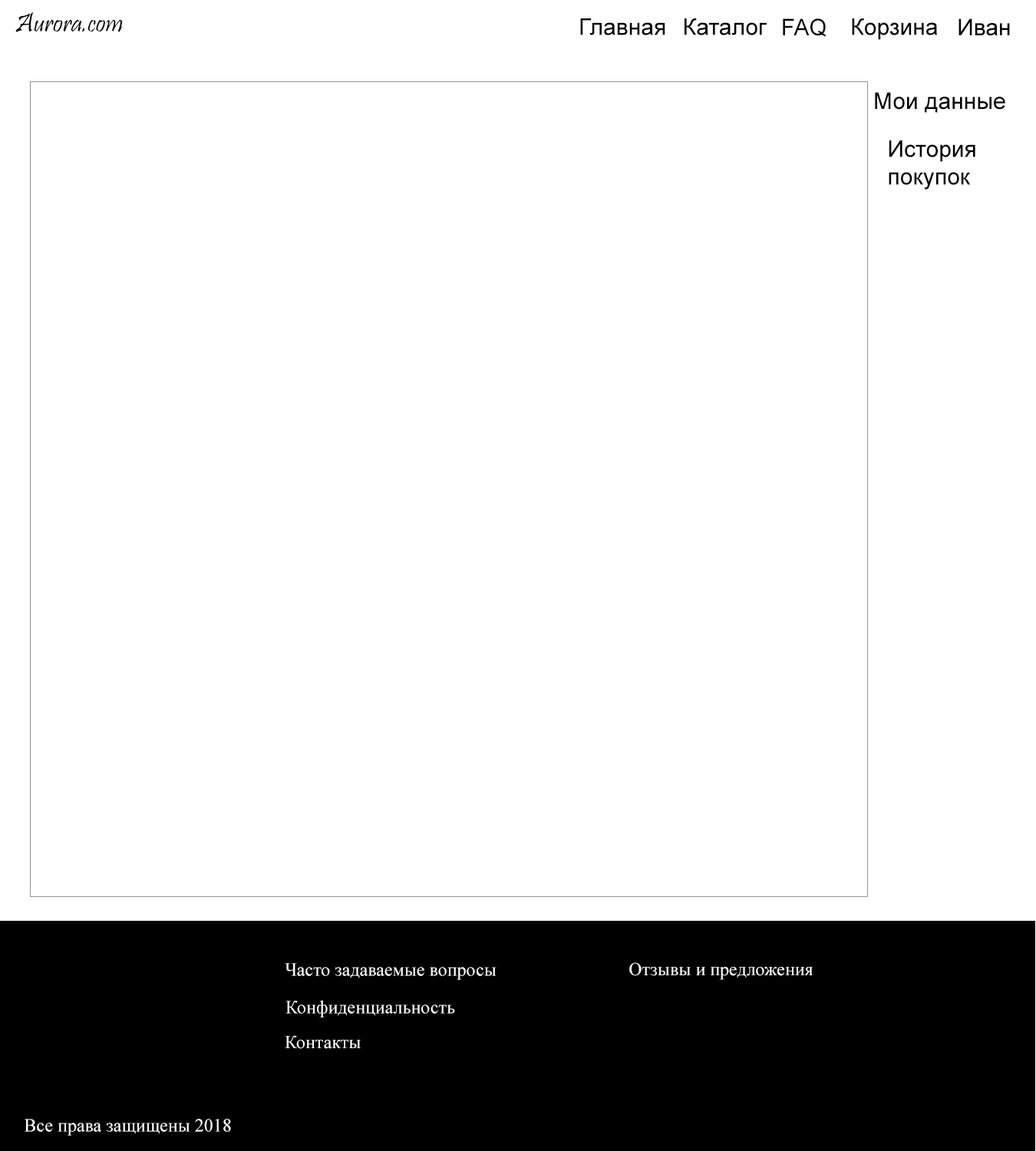
<style>
.page{position:relative;width:1036px;height:1151px;background:#ffffff}
.page>*{position:absolute;margin:0}
.t1{font:27.6px "Pristina-Regular";color:#000000}
.t2{font:23px "ArialMT";color:#000000}
.t3{font:18.4px "TimesNewRomanPSMT";color:#fffefe}
</style>
<div class="page">
<p class="t1" style="left:15px;top:12px;width:108px;height:20px">Aurora.com</p>
<p class="t2" style="left:580px;top:18px;width:85px;height:17px">Главная</p>
<p class="t2" style="left:684px;top:18px;width:83px;height:17px">Каталог</p>
<p class="t2" style="left:783px;top:18px;width:43px;height:19px">FAQ</p>
<p class="t2" style="left:852px;top:18px;width:86px;height:22px">Корзина</p>
<p class="t2" style="left:958px;top:18px;width:52px;height:18px">Иван</p>
<p class="t2" style="left:875px;top:92px;width:130px;height:21px">Мои данные</p>
<p class="t2" style="left:889px;top:140px;width:86px;height:50px;text-align:right">История<br>покупок</p>
<p class="t3" style="left:285px;top:963px;width:211px;height:17px">Часто задаваемые вопросы</p>
<p class="t3" style="left:629px;top:962px;width:184px;height:18px">Отзывы и предложения</p>
<p class="t3" style="left:285px;top:1000px;width:170px;height:18px">Конфиденциальность</p>
<p class="t3" style="left:285px;top:1035px;width:76px;height:14px">Контакты</p>
<p class="t3" style="left:24px;top:1119px;width:207px;height:17px">Все права защищены 2018</p>
</div>
